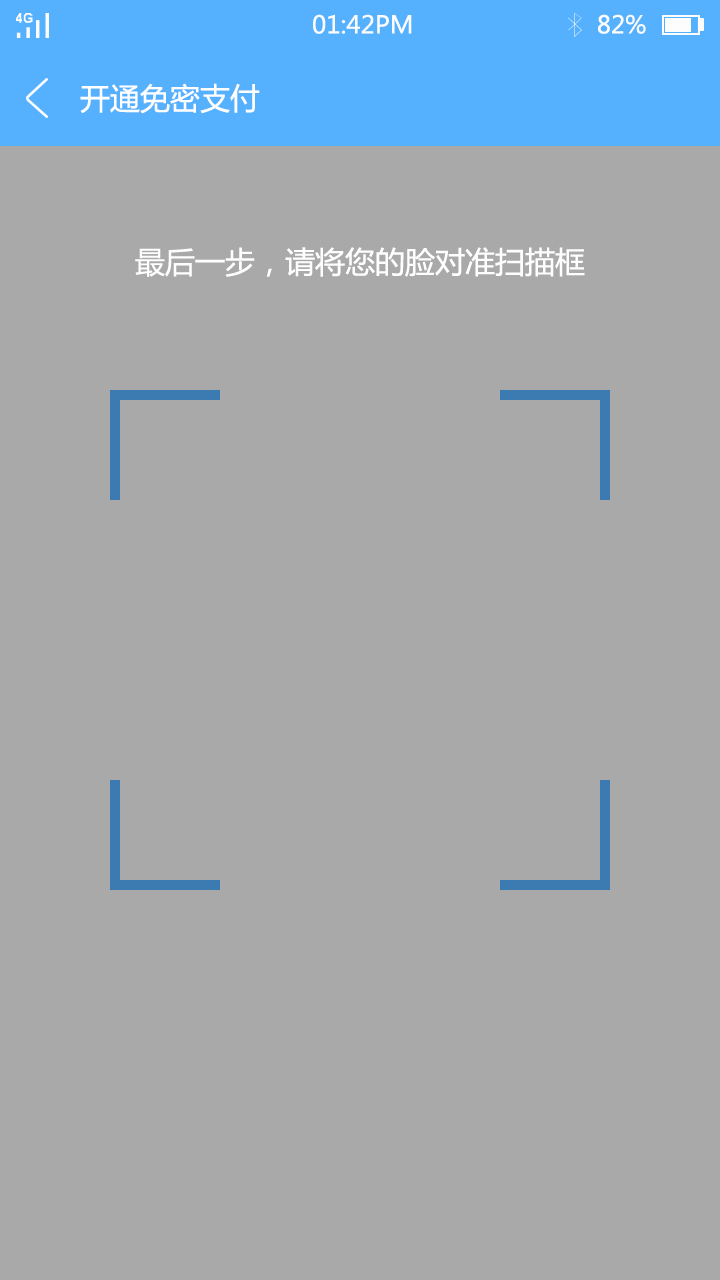
<style>
.page{position:relative;width:720px;height:1280px;background:#a9a9a9}
.page>*{position:absolute;margin:0}
.t1{font:24px "MicrosoftYaHei";color:#fbfdfc}
.t2{font:30px "MicrosoftYaHei";color:#ffffff}
.t3{font:30px "MicrosoftYaHei";color:#fefefe}
</style>
<div class="page">
<p class="t1" style="left:313px;top:14px;width:99px;height:20px">01:42PM</p>
<p class="t1" style="left:598px;top:14px;width:48px;height:20px">82%</p>
<p class="t2" style="left:80px;top:83px;width:180px;height:31px">开通免密支付</p>
<p class="t3" style="left:135px;top:247px;width:450px;height:30px">最后一步，请将您的脸对准扫描框</p>
</div>
